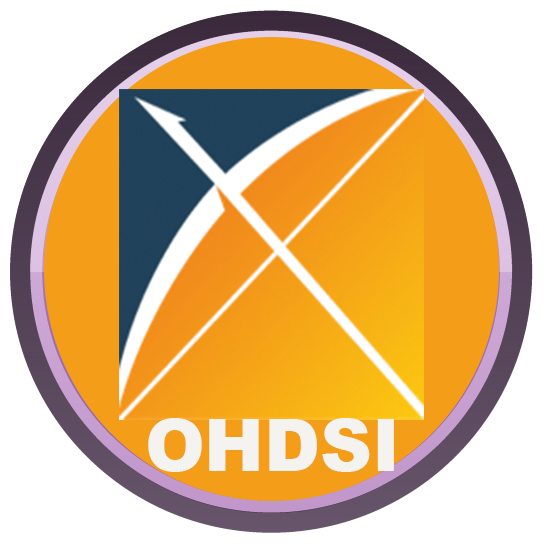
<style>
.page{position:relative;width:543px;height:543px;background:#ffffff}
.page>*{position:absolute;margin:0}
.t1{font:72px "Arial-Black";color:#f4f3f0}
</style>
<div class="page">
<p class="t1" style="left:148px;top:418px;width:246px;height:54px">OHDSI</p>
</div>
